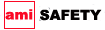
<style>
.page{position:relative;width:105px;height:30px;background:#ffffff}
.page>*{position:absolute;margin:0}
.t1{font:14px "Arial-Black";color:#fa0925}
.t2{font:14px "Arial-Black";color:#030000}
</style>
<div class="page">
<p class="t1" style="left:5px;top:9px;width:28px;height:11px">ami</p>
<p class="t2" style="left:40px;top:9px;width:62px;height:12px">SAFETY</p>
</div>
